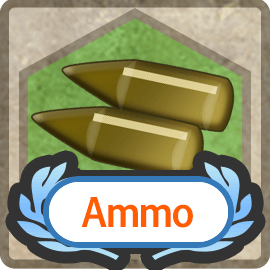
<style>
.page{position:relative;width:270px;height:270px}
.page>*{position:absolute;margin:0}
.t1{font:45px "AdobeClean-Bold";letter-spacing:-0.04em;color:#ff5d00;scale:0.9 1}
</style>
<div class="page">
<p class="t1" style="left:81px;top:197px;width:112px;height:31px">Ammo</p>
</div>
